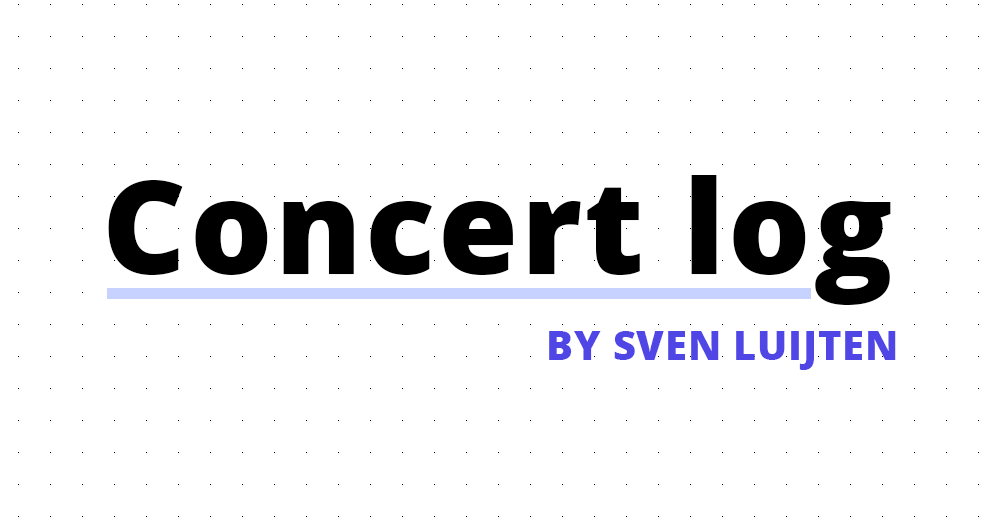
<style>
.page{position:relative;width:1000px;height:525px;background:#ffffff}
.page>*{position:absolute;margin:0}
.t1{font:130.2px "OpenSans-Extrabold";letter-spacing:0.02em;color:#000000}
.t2{font:40px "OpenSans-Extrabold";letter-spacing:0.02em;color:#4f46e5}
</style>
<div class="page">
<p class="t1" style="left:108px;top:175px;width:783px;height:130px">Concert log</p>
<p class="t2" style="left:549px;top:331px;width:347px;height:39px">BY SVEN LUIJTEN</p>
</div>
